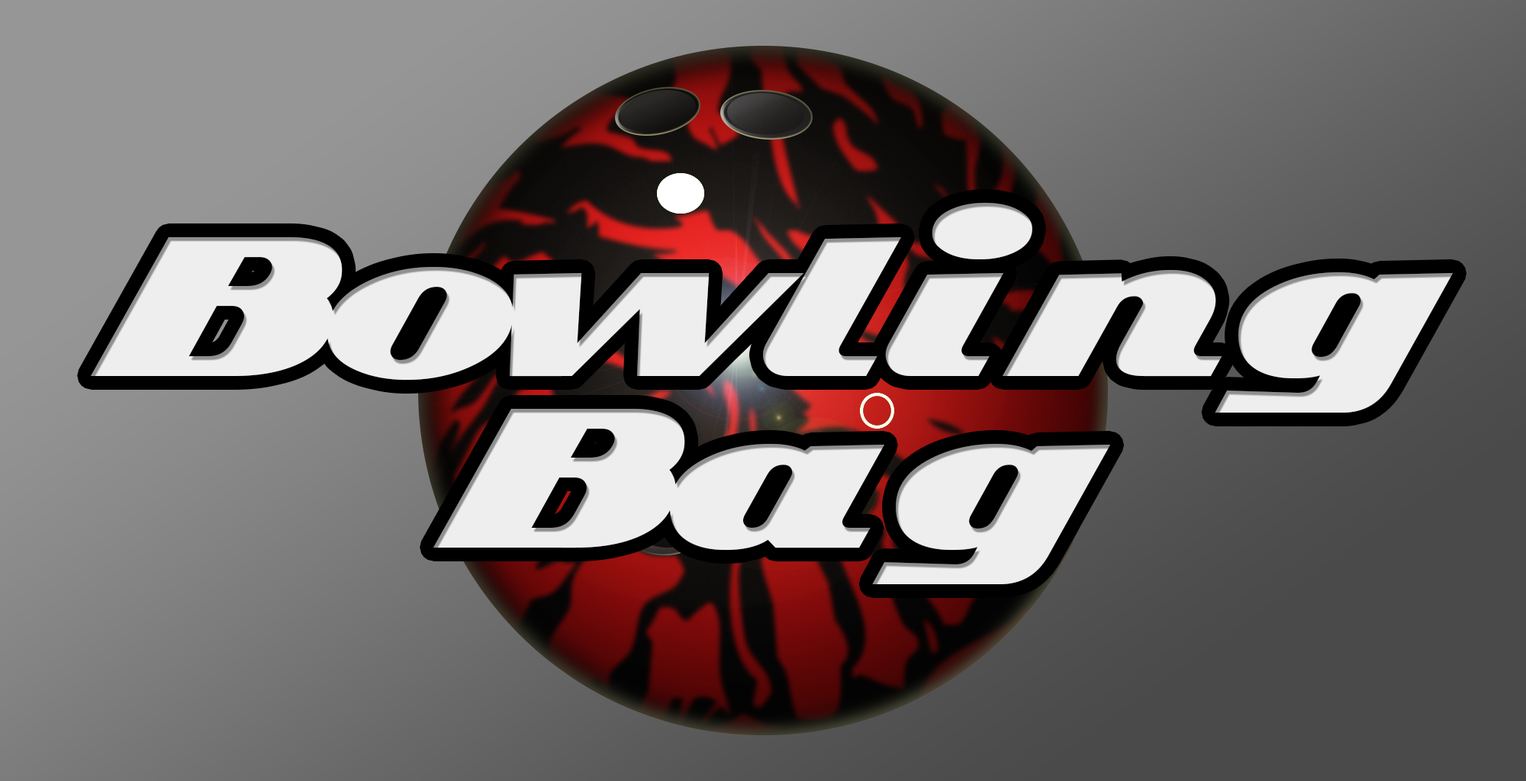
<style>
.page{position:relative;width:1526px;height:781px}
.page>*{position:absolute;margin:0}
.t1{font:198.4px/171.7px "KelvinizedNormal";color:#eeeeee}
</style>
<div class="page">
<p class="t1" style="left:91px;top:202px;width:1363px;height:382px;text-align:center">Bowling<br>Bag</p>
</div>
